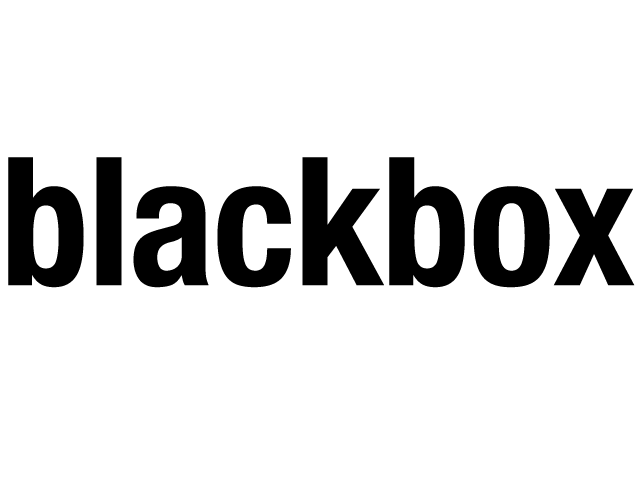
<style>
.page{position:relative;width:640px;height:480px;background:#ffffff}
.page>*{position:absolute;margin:0}
.t1{font:178.6px "HelveticaNeue-CondensedBold";letter-spacing:-0.01em;color:#000000}
</style>
<div class="page">
<p class="t1" style="left:8px;top:157px;width:627px;height:131px">blackbox</p>
</div>
